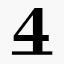
<style>
.page{position:relative;width:64px;height:64px;background:#f8f8f8}
.page>*{position:absolute;margin:0}
.t1{font:60px "Georgia-Bold";letter-spacing:0.025em;color:#000000;text-decoration:underline}
</style>
<div class="page">
<p class="t1" style="left:11px;top:8px;width:42px;height:47px">4</p>
</div>
